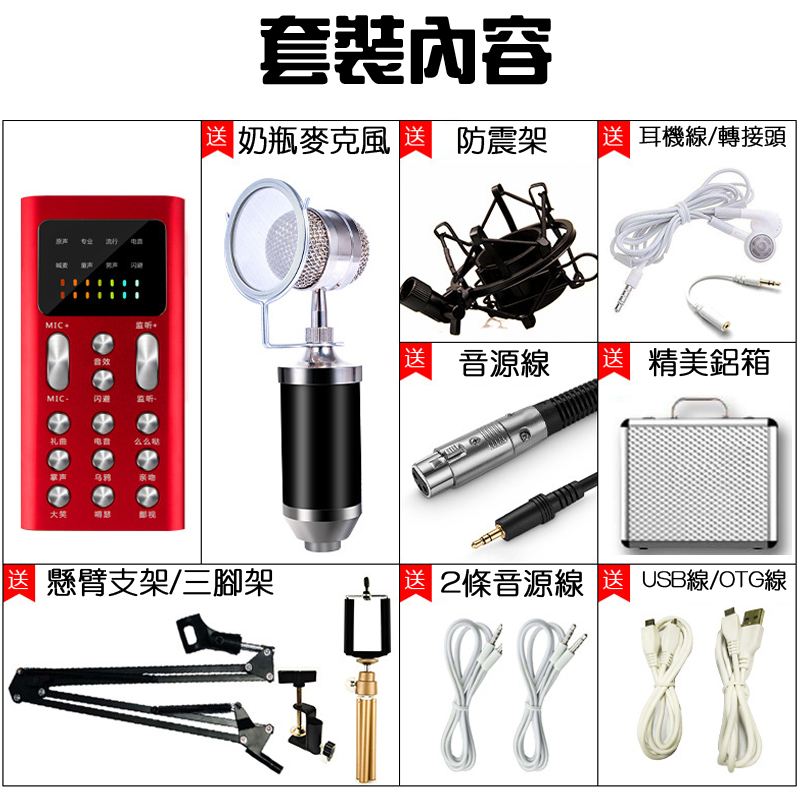
<style>
.page{position:relative;width:800px;height:800px;background:#ffffff}
.page>*{position:absolute;margin:0}
.t1{font:72px "HanWangZonYi";color:#000000;font-weight:bold}
.t2{font:30px "HanWangYenLight";color:#000000;font-weight:bold}
.t3{font:22.6px "HanWangYenLight";color:#000000;font-weight:bold}
.t4{font:23.1px "HanWangYenLight";color:#000000;font-weight:bold}
</style>
<div class="page">
<p class="t1" style="left:260px;top:15px;width:292px;height:70px">套裝內容</p>
<p class="t2" style="left:238px;top:126px;width:152px;height:29px">奶瓶麥克風</p>
<p class="t2" style="left:457px;top:126px;width:90px;height:29px">防震架</p>
<p class="t3" style="left:639px;top:125px;width:147px;height:22px">耳機線/轉接頭</p>
<p class="t2" style="left:459px;top:349px;width:91px;height:29px">音源線</p>
<p class="t2" style="left:648px;top:348px;width:122px;height:29px">精美鋁箱</p>
<p class="t2" style="left:47px;top:568px;width:227px;height:29px">懸臂支架/三腳架</p>
<p class="t2" style="left:441px;top:568px;width:143px;height:30px">2條音源線</p>
<p class="t4" style="left:642px;top:569px;width:145px;height:22px">USB線/OTG線</p>
</div>
